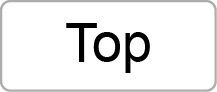
<style>
.page{position:relative;width:217px;height:92px;background:#ffffff}
.page>*{position:absolute;margin:0}
.t1{font:54.2px "ArialMT";color:#000000}
</style>
<div class="page">
<p class="t1" style="left:66px;top:23px;width:84px;height:50px">Top</p>
</div>
